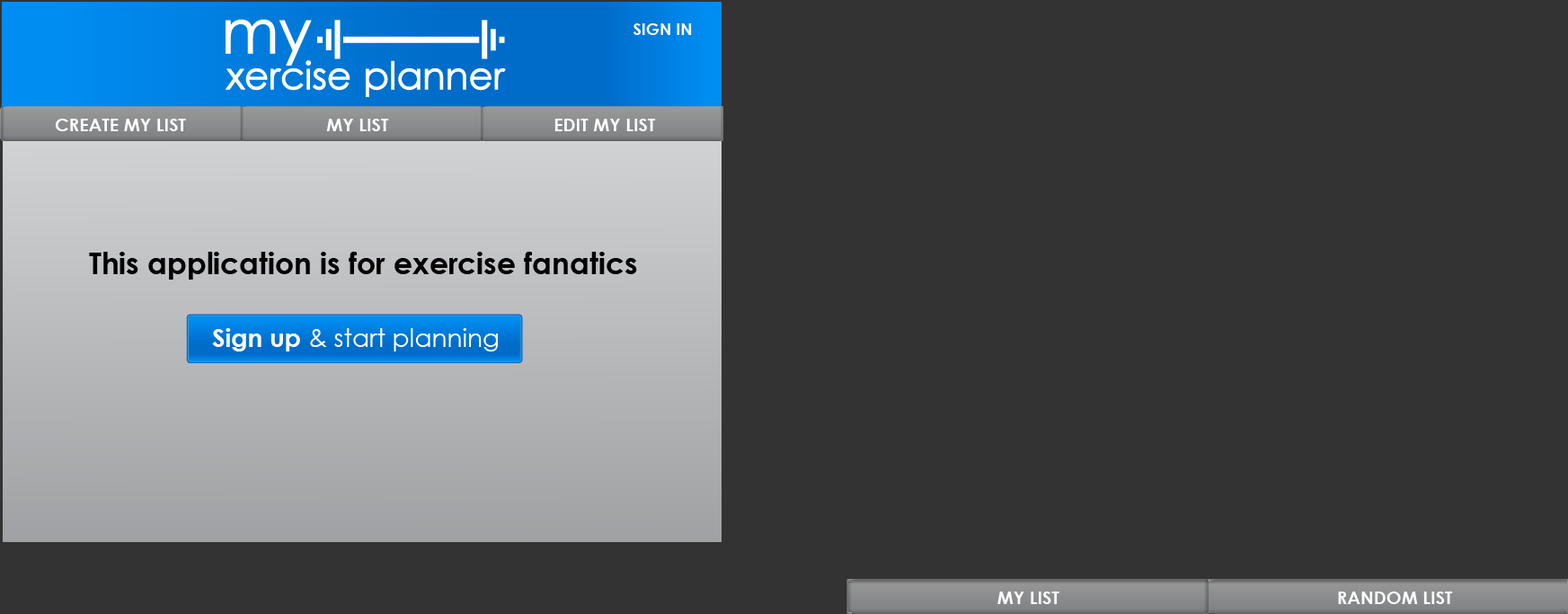
<style>
.page{position:relative;width:1568px;height:614px;background:#333333}
.page>*{position:absolute;margin:0}
.t1{font:16.2px "CenturyGothic-Bold";color:#ffffff}
.t2{font:18px "CenturyGothic-Bold";color:#ffffff;text-transform:uppercase}
.t3{font:29.7px "CenturyGothic-Bold";color:#000000}
.t4{font:25.1px "CenturyGothic";color:#ffffff}
.t5{font:25.1px "CenturyGothic-Bold";color:#ffffff}
</style>
<div class="page">
<p class="t1" style="left:633px;top:23px;width:59px;height:12px">SIGN IN</p>
<p class="t2" style="left:56px;top:119px;width:130px;height:12px">Create my List</p>
<p class="t2" style="left:326px;top:119px;width:63px;height:12px">My List</p>
<p class="t2" style="left:554px;top:119px;width:102px;height:12px">Edit my List</p>
<p class="t3" style="left:89px;top:252px;width:548px;height:27px">This application is for exercise fanatics</p>
<p class="t4" style="left:212px;top:328px;width:286px;height:23px"><span class="t5">Sign up</span> &amp; start planning</p>
<p class="t2" style="left:997px;top:591px;width:62px;height:13px">My List</p>
<p class="t2" style="left:1338px;top:591px;width:115px;height:13px">Random List</p>
</div>
